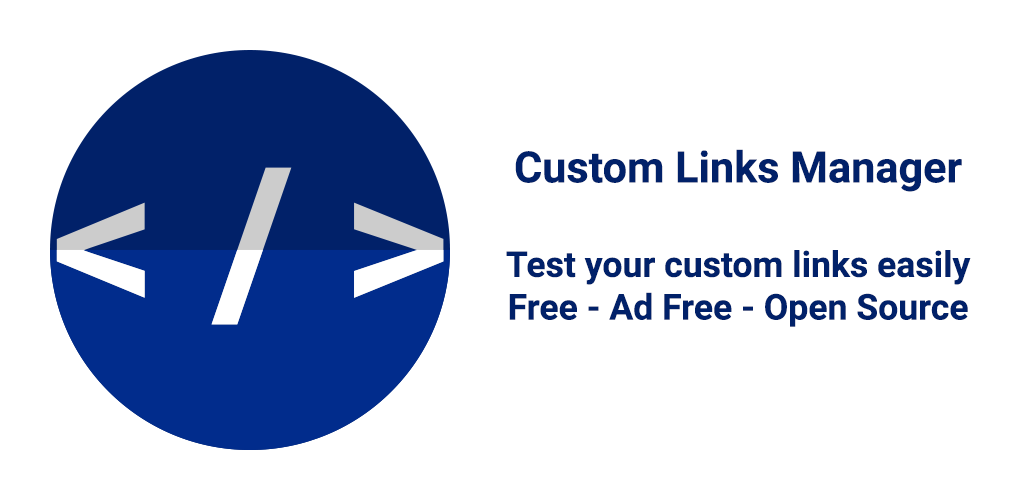
<style>
.page{position:relative;width:1024px;height:500px;background:#ffffff}
.page>*{position:absolute;margin:0}
.t1{font:35.6px "Roboto-Bold";color:#012169}
.t2{font:43.2px "Roboto-Bold";color:#012169}
</style>
<div class="page">
<p class="t1" style="left:506px;top:149px;width:465px;height:178px;text-align:center"><span class="t2">Custom Links Manager<br><br></span>Test your custom links easily<br>Free - Ad Free - Open Source</p>
</div>
